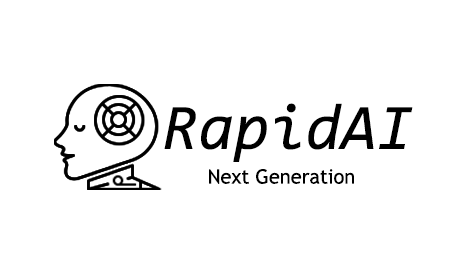
<style>
.page{position:relative;width:470px;height:265px;background:#ffffff}
.page>*{position:absolute;margin:0}
.t1{font:65px "Consolas-Italic";color:#000000}
.t2{font:20px "TrebuchetMS";color:#000000}
</style>
<div class="page">
<p class="t1" style="left:164px;top:103px;width:249px;height:59px">RapidAI</p>
<p class="t2" style="left:209px;top:169px;width:145px;height:15px">Next Generation</p>
</div>
